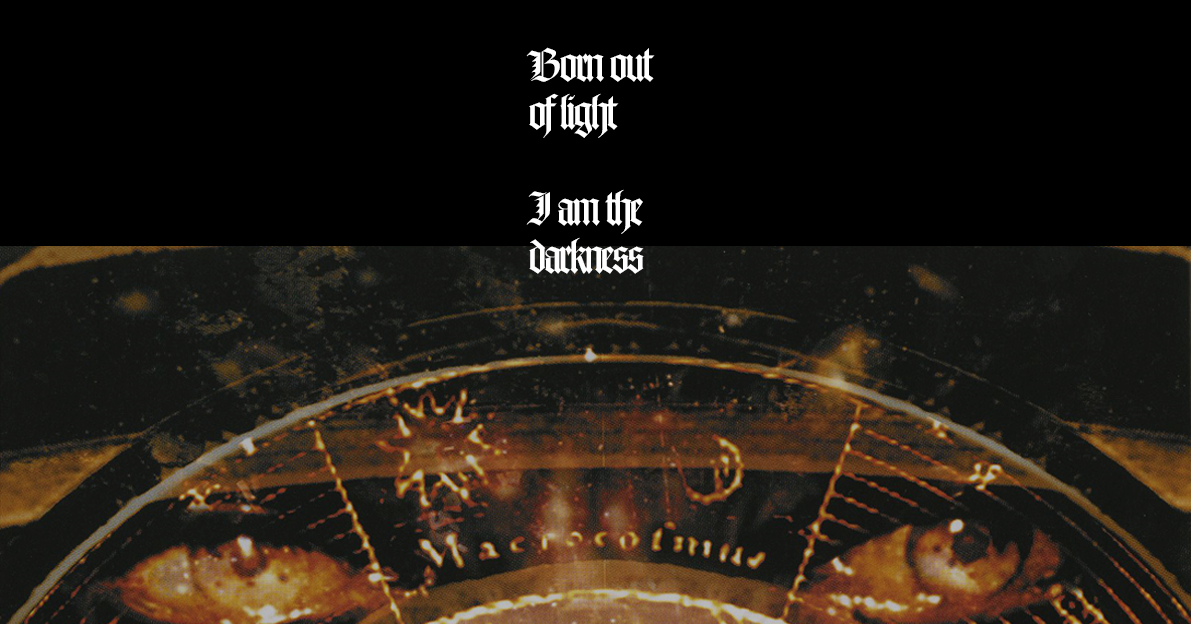
<style>
.page{position:relative;width:1191px;height:624px;background:#000000}
.page>*{position:absolute;margin:0}
.t1{font:48px/48px "NotreDameLT-Roman";letter-spacing:-0.06em;color:#ffffff}
</style>
<div class="page">
<p class="t1" style="left:526px;top:47px;width:129px;height:227px">Born out<br>of light<br><br>I am the<br>darkness</p>
</div>
